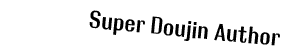
<style>
.page{position:relative;width:283px;height:56px;background:#ffffff}
.page>*{position:absolute;margin:0}
.t1{font:24px "RolloutPlain";color:#000000}
</style>
<div class="page">
<p class="t1" style="left:89px;top:10px;width:191px;height:36px;rotate:6deg">Super Doujin Author</p>
</div>
